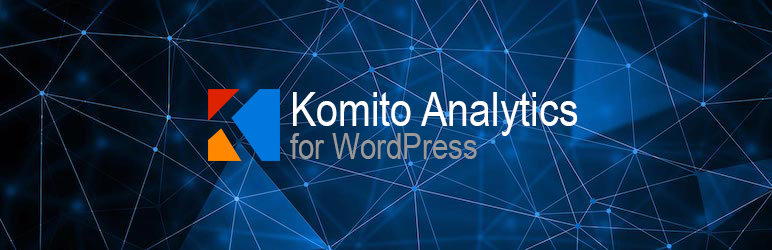
<style>
.page{position:relative;width:772px;height:250px}
.page>*{position:absolute;margin:0}
.t1{font:48px "ArialNarrow";color:#ffffff}
.t2{font:36px "ArialNarrow";color:#999999}
</style>
<div class="page">
<p class="t1" style="left:293px;top:92px;width:284px;height:44px">Komito Analytics</p>
<p class="t2" style="left:290px;top:133px;width:187px;height:26px">for WordPress</p>
</div>
